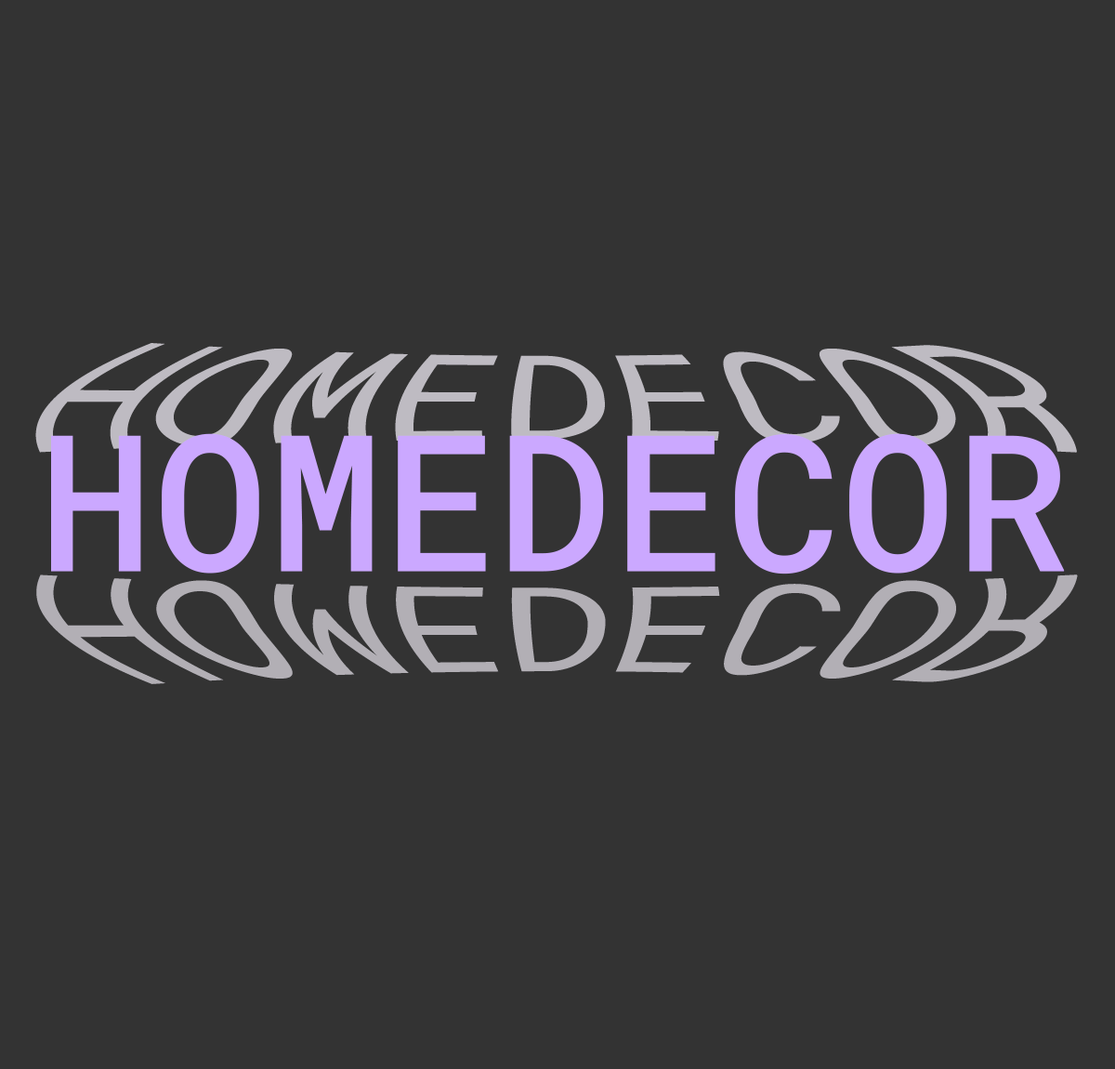
<style>
.page{position:relative;width:1115px;height:1069px;background:#333333}
.page>*{position:absolute;margin:0}
.t1{font:154.9px "RobotoMono-Regular";color:#bebbc2}
.t2{font:191px "RobotoMono-Medium";color:#cba8ff}
.t3{font:154.9px "RobotoMono-Regular";color:#b2afb5}
</style>
<div class="page">
<p class="t1" style="left:35px;top:343px;width:1042px;height:110px">HOMEDECOR</p>
<p class="t2" style="left:51px;top:433px;width:1014px;height:141px">HOMEDECOR</p>
<p class="t3" style="left:36px;top:574px;width:1042px;height:110px">HOMEDECOR</p>
</div>
